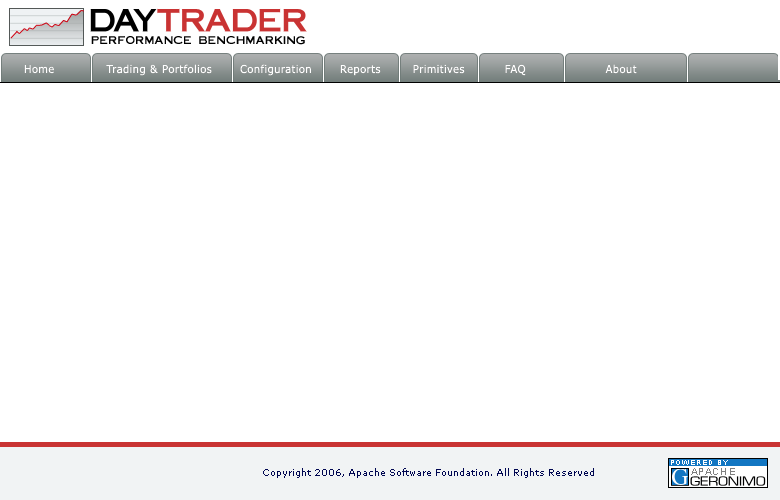
<style>
.page{position:relative;width:780px;height:500px;background:#ffffff}
.page>*{position:absolute;margin:0}
.t1{font:10.9px "ft20";letter-spacing:0.05em;color:#000000;text-transform:uppercase}
.t2{font:11px "Tahoma";letter-spacing:0.05em;color:#ffffff}
.t3{font:9px "Verdana";color:#000651}
</style>
<div class="page">
<p class="t1" style="left:91px;top:36px;width:214px;height:9px">Performance Benchmarking</p>
<p class="t2" style="left:24px;top:64px;width:613px;height:12px">Home             Trading &amp; Portfolios       Configuration       Reports        Primitives          FAQ                    About</p>
<p class="t2" style="left:24px;top:64px;width:613px;height:12px">Home             Trading &amp; Portfolios       Configuration       Reports        Primitives          FAQ                    About</p>
<p class="t3" style="left:263px;top:468px;width:331px;height:10px">Copyright 2006, Apache Software Foundation. All Rights Reserved</p>
</div>
